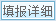
<style>
.page{position:relative;width:56px;height:21px;background:#f2fbff}
.page>*{position:absolute;margin:0}
.t1{font:12px "SimSun";letter-spacing:0.06em;color:#666666}
</style>
<div class="page">
<p class="t1" style="left:3px;top:5px;width:49px;height:12px">填报详细</p>
</div>
